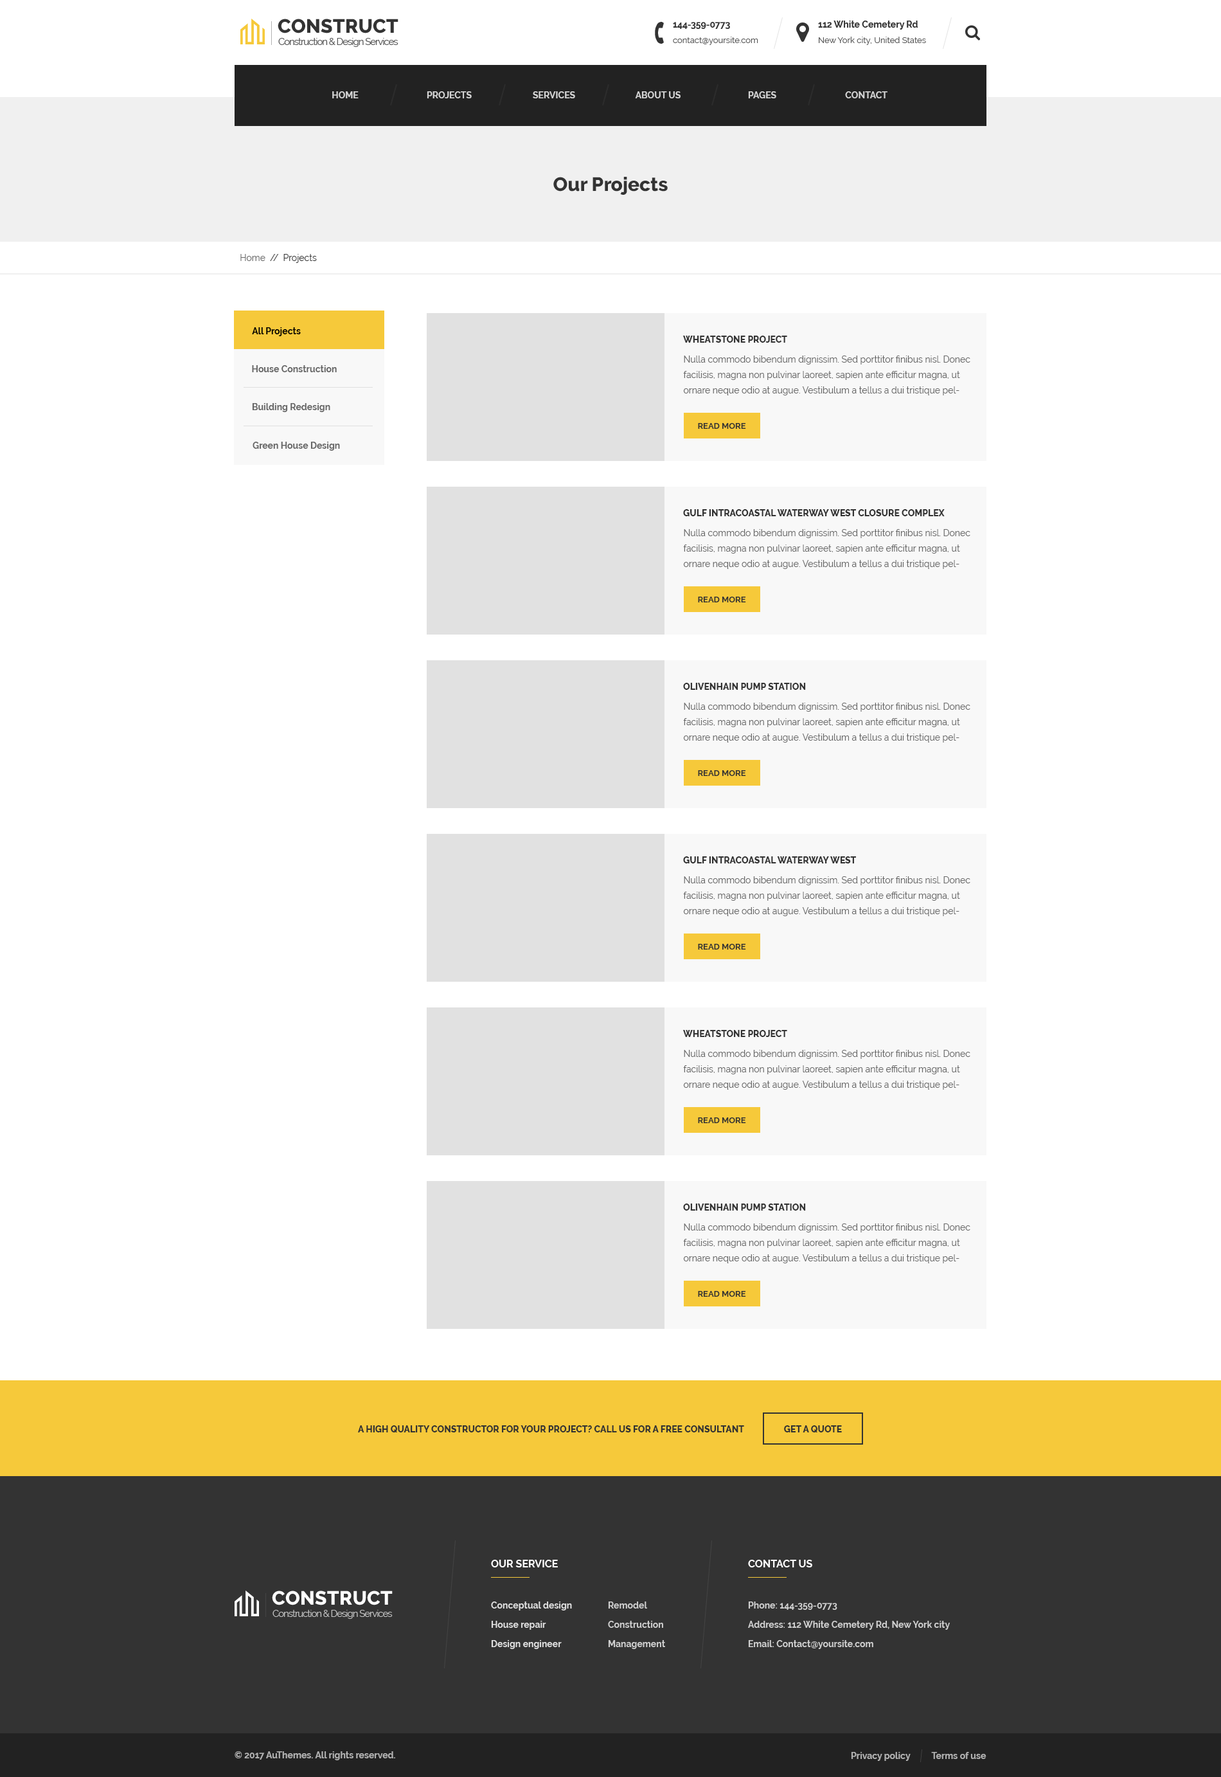
<style>
.page{position:relative;width:1221px;height:1777px;background:#ffffff}
.page>*{position:absolute;margin:0}
.t1{font:19.3px "Raleway-ExtraBold";letter-spacing:0.01em;color:#333333}
.t2{font:9px "Raleway-Bold";color:#333333}
.t3{font:9.6px "Raleway-Regular";letter-spacing:-0.07em;color:#555555}
.t4{font:8.4px "Raleway-Regular";color:#555555}
.t5{font:9px "Raleway-Bold";color:#d4d4d4;text-transform:uppercase}
.t6{font:19.3px "Raleway-ExtraBold";color:#333333}
.t7{font:9px "Raleway-Regular";color:#333333}
.t8{font:9px "Raleway-Regular";color:#666666}
.t9{font:9px "Raleway-Bold";color:#000000}
.t10{font:9px "Raleway-ExtraBold";color:#333333;text-transform:uppercase}
.t11{font:9px "Raleway-Bold";color:#666666}
.t12{font:9px/15.4px "Raleway-Regular";color:#666666}
.t13{font:8.4px "Raleway-Bold";color:#333333;text-transform:uppercase}
.t14{font:10.3px "Raleway-Bold";color:#ffffff;text-transform:uppercase}
.t15{font:19.3px "Raleway-ExtraBold";letter-spacing:0.01em;color:#ffffff}
.t16{font:9px/19.3px "Raleway-Bold";color:#e1e1e1}
.t17{font:9px/19.3px "Raleway-Bold";color:#d0d0d0}
.t18{font:9.6px "Raleway-Regular";letter-spacing:-0.07em;color:#c5c5c5}
.t19{font:9px "Raleway-Bold";color:#b2b2b2}
</style>
<div class="page">
<p class="t1" style="left:278px;top:19px;width:121px;height:14px">CONSTRUCT</p>
<p class="t2" style="left:673px;top:22px;width:57px;height:7px">144-359-0773</p>
<p class="t2" style="left:818px;top:21px;width:101px;height:9px">112 White Cemetery Rd</p>
<p class="t3" style="left:278px;top:38px;width:121px;height:9px">Construction &amp; Design Services</p>
<p class="t4" style="left:673px;top:37px;width:86px;height:8px">contact@yoursite.com</p>
<p class="t4" style="left:819px;top:37px;width:107px;height:8px">New York city, United States</p>
<p class="t5" style="left:332px;top:91px;width:27px;height:7px">Home</p>
<p class="t5" style="left:427px;top:91px;width:45px;height:7px">Projects</p>
<p class="t5" style="left:533px;top:91px;width:42px;height:7px">Services</p>
<p class="t5" style="left:635px;top:91px;width:46px;height:7px">About Us</p>
<p class="t5" style="left:748px;top:91px;width:29px;height:7px">Pages</p>
<p class="t5" style="left:845px;top:91px;width:43px;height:7px">Contact</p>
<p class="t6" style="left:554px;top:177px;width:114px;height:18px">Our Projects</p>
<p class="t7" style="left:240px;top:254px;width:77px;height:9px"><span class="t8">Home</span>  //  Projects</p>
<p class="t9" style="left:252px;top:327px;width:49px;height:9px">All Projects</p>
<p class="t10" style="left:683px;top:336px;width:105px;height:7px">WHEATSTONE PROJECT</p>
<p class="t11" style="left:252px;top:365px;width:85px;height:7px">House Construction</p>
<p class="t12" style="left:683px;top:356px;width:288px;height:39px">Nulla commodo bibendum dignissim. Sed porttitor finibus nisl. Donec facilisis, magna non pulvinar laoreet, sapien ante efficitur magna, ut ornare neque odio at augue. Vestibulum a tellus a dui tristique pellentesque vitae ac neque. Integer egestas elementum placerat. Mauris interdum nec ligula eu iaculis.</p>
<p class="t11" style="left:252px;top:403px;width:78px;height:9px">Building Redesign</p>
<p class="t13" style="left:698px;top:423px;width:48px;height:6px">Read More</p>
<p class="t11" style="left:253px;top:442px;width:87px;height:9px">Green House Design</p>
<p class="t10" style="left:683px;top:509px;width:262px;height:7px">GULF INTRACOASTAL WATERWAY WEST CLOSURE COMPLEX</p>
<p class="t12" style="left:683px;top:529px;width:288px;height:40px">Nulla commodo bibendum dignissim. Sed porttitor finibus nisl. Donec facilisis, magna non pulvinar laoreet, sapien ante efficitur magna, ut ornare neque odio at augue. Vestibulum a tellus a dui tristique pellentesque vitae ac neque. Integer egestas elementum placerat. Mauris interdum nec ligula eu iaculis.</p>
<p class="t13" style="left:698px;top:597px;width:48px;height:5px">Read More</p>
<p class="t10" style="left:683px;top:683px;width:123px;height:7px">OLIVENHAIN PUMP STATION</p>
<p class="t12" style="left:683px;top:703px;width:288px;height:39px">Nulla commodo bibendum dignissim. Sed porttitor finibus nisl. Donec facilisis, magna non pulvinar laoreet, sapien ante efficitur magna, ut ornare neque odio at augue. Vestibulum a tellus a dui tristique pellentesque vitae ac neque. Integer egestas elementum placerat. Mauris interdum nec ligula eu iaculis.</p>
<p class="t13" style="left:698px;top:770px;width:48px;height:6px">Read More</p>
<p class="t10" style="left:683px;top:856px;width:173px;height:7px">GULF INTRACOASTAL WATERWAY WEST</p>
<p class="t12" style="left:683px;top:876px;width:288px;height:40px">Nulla commodo bibendum dignissim. Sed porttitor finibus nisl. Donec facilisis, magna non pulvinar laoreet, sapien ante efficitur magna, ut ornare neque odio at augue. Vestibulum a tellus a dui tristique pellentesque vitae ac neque. Integer egestas elementum placerat. Mauris interdum nec ligula eu iaculis.</p>
<p class="t13" style="left:698px;top:944px;width:48px;height:6px">Read More</p>
<p class="t10" style="left:683px;top:1030px;width:105px;height:7px">WHEATSTONE PROJECT</p>
<p class="t12" style="left:683px;top:1050px;width:288px;height:40px">Nulla commodo bibendum dignissim. Sed porttitor finibus nisl. Donec facilisis, magna non pulvinar laoreet, sapien ante efficitur magna, ut ornare neque odio at augue. Vestibulum a tellus a dui tristique pellentesque vitae ac neque. Integer egestas elementum placerat. Mauris interdum nec ligula eu iaculis.</p>
<p class="t13" style="left:698px;top:1117px;width:48px;height:6px">Read More</p>
<p class="t10" style="left:683px;top:1203px;width:123px;height:7px">OLIVENHAIN PUMP STATION</p>
<p class="t12" style="left:683px;top:1223px;width:288px;height:40px">Nulla commodo bibendum dignissim. Sed porttitor finibus nisl. Donec facilisis, magna non pulvinar laoreet, sapien ante efficitur magna, ut ornare neque odio at augue. Vestibulum a tellus a dui tristique pellentesque vitae ac neque. Integer egestas elementum placerat. Mauris interdum nec ligula eu iaculis.</p>
<p class="t13" style="left:698px;top:1291px;width:48px;height:6px">Read More</p>
<p class="t10" style="left:358px;top:1425px;width:386px;height:7px">a high quality constructor for your project? Call us for a FREE CONSULTANT</p>
<p class="t10" style="left:784px;top:1425px;width:58px;height:7px">Get A Quote</p>
<p class="t14" style="left:491px;top:1560px;width:67px;height:7px">Our service</p>
<p class="t14" style="left:748px;top:1560px;width:65px;height:7px">ContacT Us</p>
<p class="t15" style="left:272px;top:1590px;width:121px;height:15px">CONSTRUCT</p>
<p class="t16" style="left:491px;top:1601px;width:81px;height:48px">Conceptual design<br>House repair<br>Design engineer</p>
<p class="t17" style="left:608px;top:1601px;width:57px;height:48px">Remodel<br>Construction<br>Management</p>
<p class="t17" style="left:748px;top:1601px;width:202px;height:48px">Phone: 144-359-0773<br>Address: 112 White Cemetery Rd, New York city<br>Email: Contact@yoursite.com</p>
<p class="t18" style="left:273px;top:1610px;width:120px;height:9px">Construction &amp; Design Services</p>
<p class="t19" style="left:235px;top:1751px;width:160px;height:9px">© 2017 AuThemes. All rights reserved.</p>
<p class="t19" style="left:851px;top:1752px;width:136px;height:9px">Privacy policy          Terms of use</p>
</div>
